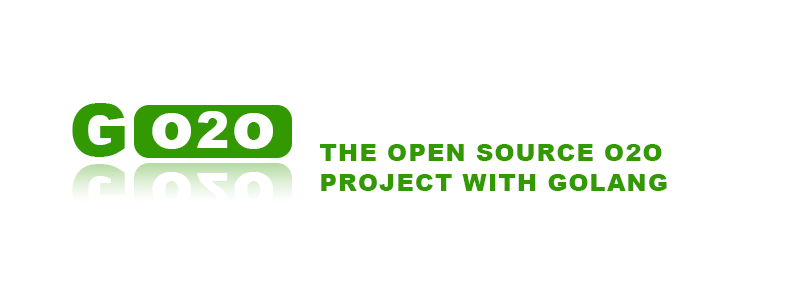
<style>
.page{position:relative;width:800px;height:300px;background:#ffffff}
.page>*{position:absolute;margin:0}
.t1{font:72px "Arial-Black";letter-spacing:0.05em;color:#339900}
.t2{font:65px "Arial-Black";letter-spacing:0.05em;color:#ffffff}
.t3{font:50px "Arial-Black";letter-spacing:0.05em;color:#ffffff}
.t4{font:24px/30px "Arial-Black";letter-spacing:0.05em;color:#339900}
</style>
<div class="page">
<p class="t1" style="left:72px;top:103px;width:53px;height:54px">G</p>
<p class="t2" style="left:152px;top:111px;width:121px;height:38px">o<span class="t3">2</span>o</p>
<p class="t4" style="left:320px;top:144px;width:347px;height:47px">THE OPEN SOURCE O2O <br>PROJECT WITH GOLANG</p>
</div>
